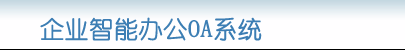
<style>
.page{position:relative;width:405px;height:50px;background:#fffeff}
.page>*{position:absolute;margin:0}
.t1{font:24px "YouYuan";color:#3d7eb4;font-weight:bold}
</style>
<div class="page">
<p class="t1" style="left:40px;top:17px;width:222px;height:24px">企业智能办公OA系统</p>
</div>
